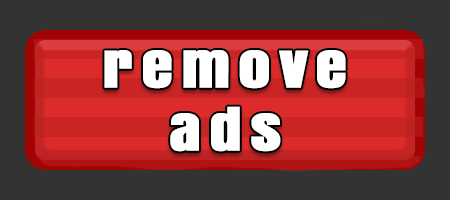
<style>
.page{position:relative;width:450px;height:200px;background:#333333}
.page>*{position:absolute;margin:0}
.t1{font:50px/62.5px "Anton";letter-spacing:0.125em;color:#ffffff;font-weight:bold;scale:1.25 1}
</style>
<div class="page">
<p class="t1" style="left:104px;top:50px;width:242px;height:102px;text-align:center">remove<br>ads</p>
</div>
